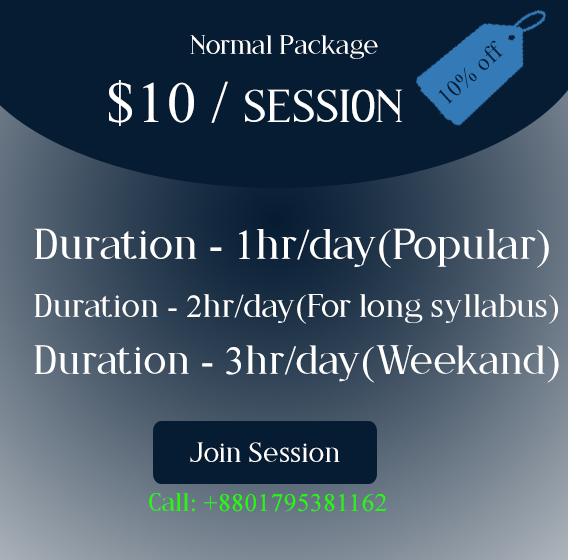
<style>
.page{position:relative;width:568px;height:560px;background:#061c33}
.page>*{position:absolute;margin:0}
.t1{font:26px "DELIAFREE";letter-spacing:0.025em;color:#ffffff}
.t2{font:24px "TimesNewRomanPSMT";letter-spacing:0.025em;color:#061c33;scale:0.96 1}
.t3{font:45px "DELIAFREE";letter-spacing:0.025em;color:#ffffff}
.t4{font:58px "TimesNewRomanPSMT";letter-spacing:0.025em;color:#ffffff}
.t5{font:42px "DELIAFREE";letter-spacing:0.025em;color:#ffffff}
.t6{font:42px "TimesNewRomanPSMT";letter-spacing:0.025em;color:#ffffff}
.t7{font:32px "DELIAFREE";letter-spacing:0.025em;color:#ffffff}
.t8{font:32px "TimesNewRomanPSMT";letter-spacing:0.025em;color:#ffffff}
.t9{font:40px "DELIAFREE";letter-spacing:0.025em;color:#ffffff}
.t10{font:40px "TimesNewRomanPSMT";letter-spacing:0.025em;color:#ffffff}
.t11{font:27px "DELIAFREE";letter-spacing:0.025em;color:#ffffff}
.t12{font:25px "TimesNewRomanPSMT";letter-spacing:0.025em;color:#1eff00}
.t13{font:25px "DELIAFREE";letter-spacing:0.025em;color:#1eff00}
</style>
<div class="page">
<p class="t1" style="left:190px;top:35px;width:188px;height:24px">Normal Package</p>
<p class="t2" style="left:438px;top:40px;width:66px;height:65px;rotate:-43deg">10% off</p>
<p class="t3" style="left:109px;top:80px;width:294px;height:46px"><span class="t4">$10 / </span>SESSION</p>
<p class="t5" style="left:34px;top:228px;width:515px;height:40px">Duration <span class="t6">- 1</span>hr<span class="t6">/</span>day<span class="t6">(</span>Popular<span class="t6">)</span></p>
<p class="t7" style="left:34px;top:294px;width:524px;height:30px">Duration <span class="t8">- 2</span>hr<span class="t8">/</span>day<span class="t8">(</span>For long syllabus<span class="t8">)</span></p>
<p class="t9" style="left:34px;top:345px;width:525px;height:38px">Duration <span class="t10">- 3</span>hr<span class="t10">/</span>day<span class="t10">(</span>Weekand<span class="t10">)</span></p>
<p class="t11" style="left:190px;top:442px;width:150px;height:20px">Join Session</p>
<p class="t12" style="left:149px;top:493px;width:238px;height:19px"><span class="t13">Call</span>: +8801795381162</p>
</div>
